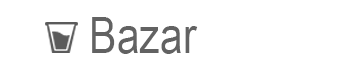
<style>
.page{position:relative;width:353px;height:72px;background:#ffffff}
.page>*{position:absolute;margin:0}
.t1{font:50px "ArialNarrow";color:#626262}
</style>
<div class="page">
<p class="t1" style="left:92px;top:17px;width:106px;height:37px">Bazar</p>
</div>
